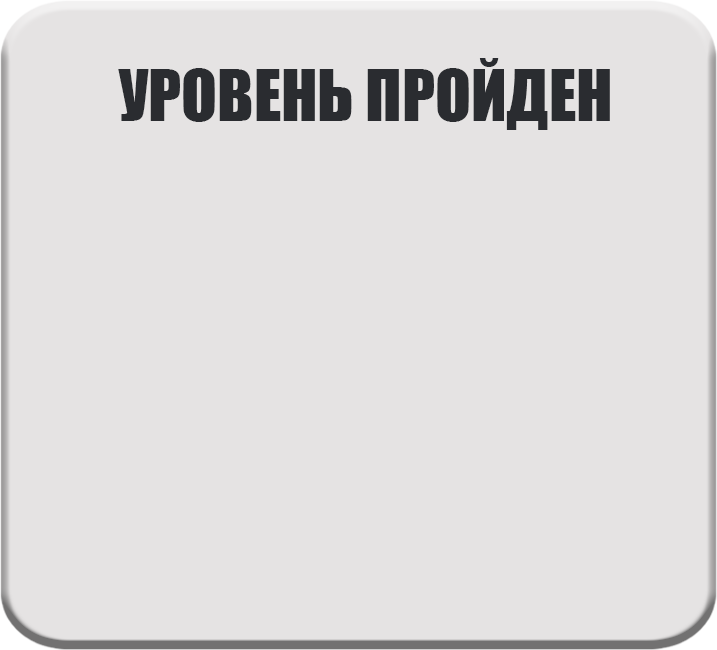
<style>
.page{position:relative;width:717px;height:650px;background:#e5e3e3}
.page>*{position:absolute;margin:0}
.t1{font:65.7px "Impact";color:#2a2c30}
</style>
<div class="page">
<p class="t1" style="left:118px;top:58px;width:492px;height:72px">УРОВЕНЬ ПРОЙДЕН</p>
</div>
